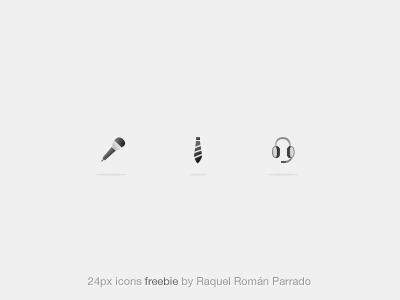
<style>
.page{position:relative;width:400px;height:300px;background:#f0f0f0}
.page>*{position:absolute;margin:0}
.t1{font:11px "HelveticaNeue";color:#999999}
.t2{font:11px "HelveticaNeue";color:#666666}
</style>
<div class="page">
<p class="t1" style="left:87px;top:277px;width:224px;height:11px">24px icons <span class="t2">freebie </span>by Raquel Román Parrado</p>
</div>
